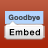
<style>
.page{position:relative;width:48px;height:48px}
.page>*{position:absolute;margin:0}
.t1{font:7.1px "HelveticaNeue-Bold";letter-spacing:0.025em;color:#484f57}
.t2{font:8.5px "HelveticaNeue";letter-spacing:0.12em;color:#000000}
</style>
<div class="page">
<p class="t1" style="left:8px;top:14px;width:32px;height:8px">Goodbye</p>
<p class="t2" style="left:9px;top:29px;width:31px;height:7px">Embed</p>
</div>
